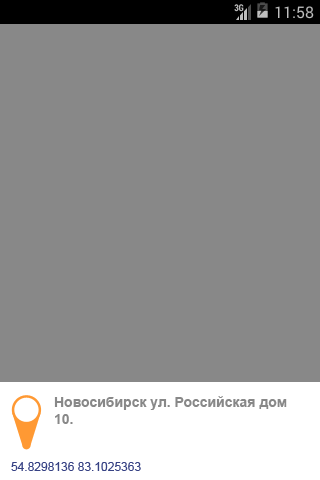
<style>
.page{position:relative;width:320px;height:480px;background:#888888}
.page>*{position:absolute;margin:0}
.t1{font:14px "Arial-BoldMT";color:#888888}
.t2{font:12px "ArialMT";color:#374284}
</style>
<div class="page">
<p class="t1" style="left:54px;top:396px;width:233px;height:28px">Новосибирск ул. Российская дом <br>10.</p>
<p class="t2" style="left:11px;top:462px;width:130px;height:9px">54.8298136 83.1025363</p>
</div>
